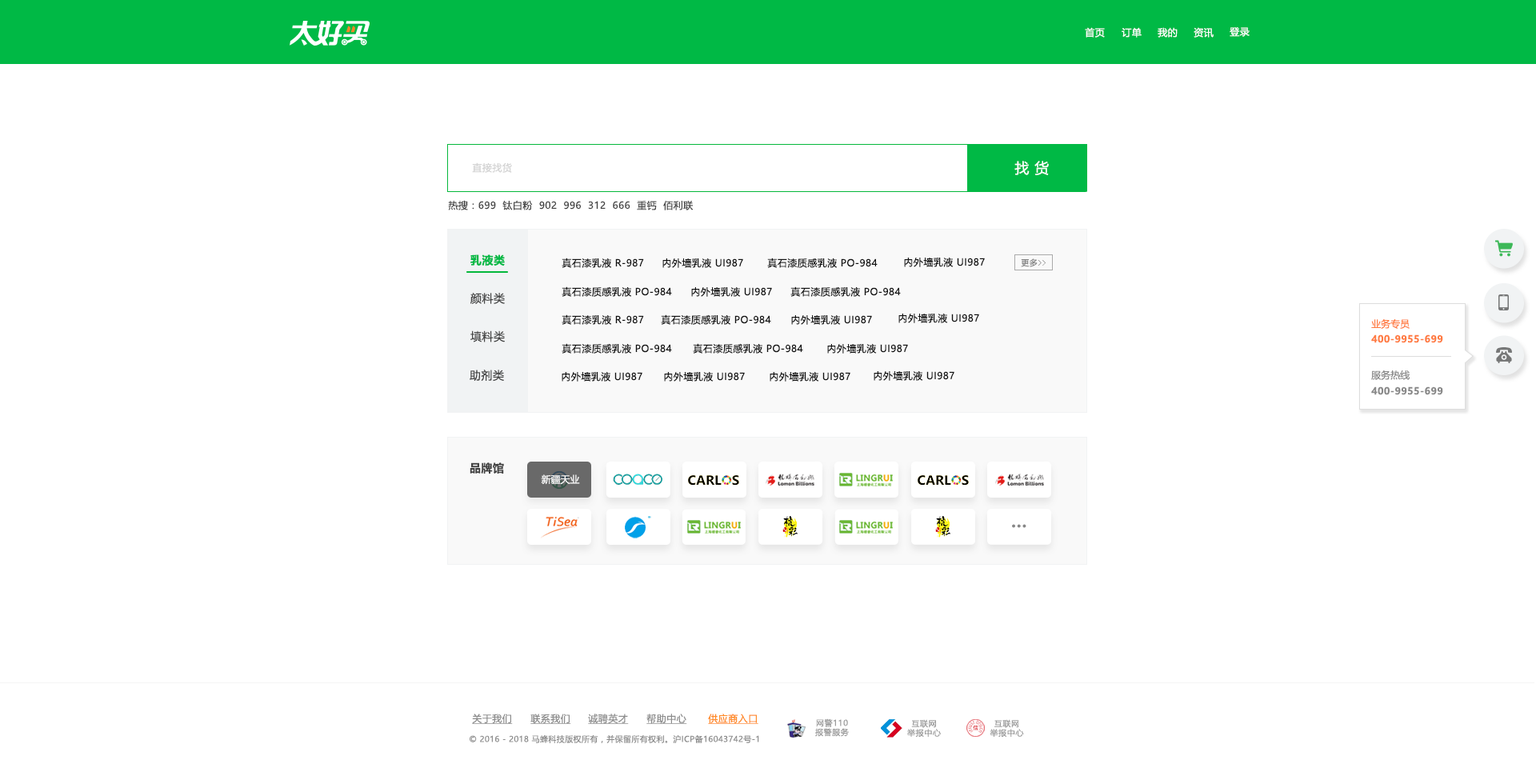
<style>
.page{position:relative;width:1536px;height:776px;background:#ffffff}
.page>*{position:absolute;margin:0}
.t1{font:9.6px "MicrosoftYaHeiUI";letter-spacing:0.04em;color:#ffffff}
.t2{font:14.4px "MicrosoftYaHeiUI";letter-spacing:0.04em;color:#ffffff}
.t3{font:9.6px "MicrosoftYaHeiUI";letter-spacing:0.04em;color:#d2d2d2}
.t4{font:9.6px "MicrosoftYaHeiUI";letter-spacing:0.04em;color:#444444}
.t5{font:11.2px "MicrosoftYaHeiUI-Bold";letter-spacing:0.04em;color:#00b945}
.t6{font:9.6px "MicrosoftYaHeiUI";letter-spacing:0.04em;color:#121212}
.t7{font:8px "MicrosoftYaHeiUI";letter-spacing:0.04em;color:#848484}
.t8{font:8px "FangSong";letter-spacing:0.04em;color:#848484}
.t9{font:11.2px "MicrosoftYaHeiUI";letter-spacing:0.04em;color:#424242}
.t10{font:9.6px "MicrosoftYaHeiUI";color:#ff7b41}
.t11{font:9.6px "MicrosoftYaHeiUI-Bold";letter-spacing:0.04em;color:#ff7b41}
.t12{font:9.6px "MicrosoftYaHeiUI";color:#888888}
.t13{font:9.6px "MicrosoftYaHeiUI-Bold";letter-spacing:0.04em;color:#888888}
.t14{font:11.2px "MicrosoftYaHeiUI-Bold";letter-spacing:0.04em;color:#424242}
.t15{font:9.6px "MicrosoftYaHei";color:#f7f7f7}
.t16{font:11.2px "MicrosoftYaHeiUI-Bold";letter-spacing:0.04em;color:#888888}
.t17{font:9.6px "MicrosoftYaHeiUI";letter-spacing:0.04em;color:#8c8c8c;text-decoration:underline}
.t18{font:9.6px "MicrosoftYaHeiUI";letter-spacing:0.04em;color:#ff8b25;text-decoration:underline}
.t19{font:8px/9.3px "MicrosoftYaHei";letter-spacing:0.06em;color:#999999}
.t20{font:8px "MicrosoftYaHeiUI";letter-spacing:0.04em;color:#8c8c8c}
</style>
<div class="page">
<p class="t1" style="left:1085px;top:27px;width:20px;height:11px">首页</p>
<p class="t1" style="left:1122px;top:27px;width:20px;height:11px">订单</p>
<p class="t1" style="left:1158px;top:27px;width:20px;height:11px">我的</p>
<p class="t1" style="left:1194px;top:27px;width:20px;height:11px">资讯</p>
<p class="t1" style="left:1230px;top:27px;width:20px;height:10px">登录</p>
<p class="t2" style="left:1015px;top:161px;width:34px;height:14px">找 货</p>
<p class="t3" style="left:472px;top:162px;width:40px;height:11px">直接找货</p>
<p class="t4" style="left:448px;top:200px;width:245px;height:10px">热搜：699  钛白粉  902  996  312  666  重钙  佰利联</p>
<p class="t5" style="left:470px;top:254px;width:35px;height:12px">乳液类</p>
<p class="t6" style="left:562px;top:258px;width:82px;height:10px">真石漆乳液 R-987</p>
<p class="t6" style="left:663px;top:258px;width:80px;height:10px">内外墙乳液 UI987</p>
<p class="t6" style="left:767px;top:258px;width:111px;height:10px">真石漆质感乳液 PO-984</p>
<p class="t6" style="left:904px;top:257px;width:81px;height:10px">内外墙乳液 UI987</p>
<p class="t7" style="left:1021px;top:258px;width:25px;height:9px">更多<span class="t8">&gt;&gt;</span></p>
<p class="t9" style="left:470px;top:293px;width:35px;height:11px">颜料类</p>
<p class="t6" style="left:562px;top:286px;width:110px;height:11px">真石漆质感乳液 PO-984</p>
<p class="t6" style="left:691px;top:286px;width:81px;height:11px">内外墙乳液 UI987</p>
<p class="t6" style="left:791px;top:286px;width:110px;height:11px">真石漆质感乳液 PO-984</p>
<p class="t6" style="left:562px;top:314px;width:82px;height:11px">真石漆乳液 R-987</p>
<p class="t6" style="left:661px;top:314px;width:110px;height:11px">真石漆质感乳液 PO-984</p>
<p class="t6" style="left:791px;top:314px;width:81px;height:11px">内外墙乳液 UI987</p>
<p class="t6" style="left:899px;top:313px;width:80px;height:10px">内外墙乳液 UI987</p>
<p class="t10" style="left:1371px;top:318px;width:39px;height:11px">业务专员</p>
<p class="t9" style="left:470px;top:330px;width:35px;height:12px">填料类</p>
<p class="t11" style="left:1371px;top:334px;width:73px;height:9px">400-9955-699</p>
<p class="t6" style="left:562px;top:343px;width:110px;height:11px">真石漆质感乳液 PO-984</p>
<p class="t6" style="left:693px;top:343px;width:110px;height:11px">真石漆质感乳液 PO-984</p>
<p class="t6" style="left:827px;top:343px;width:81px;height:11px">内外墙乳液 UI987</p>
<p class="t9" style="left:470px;top:370px;width:34px;height:12px">助剂类</p>
<p class="t6" style="left:562px;top:371px;width:81px;height:11px">内外墙乳液 UI987</p>
<p class="t6" style="left:664px;top:371px;width:81px;height:11px">内外墙乳液 UI987</p>
<p class="t6" style="left:770px;top:371px;width:81px;height:11px">内外墙乳液 UI987</p>
<p class="t6" style="left:874px;top:370px;width:81px;height:11px">内外墙乳液 UI987</p>
<p class="t12" style="left:1371px;top:370px;width:39px;height:10px">服务热线</p>
<p class="t13" style="left:1371px;top:386px;width:73px;height:9px">400-9955-699</p>
<p class="t14" style="left:470px;top:462px;width:34px;height:12px">品牌馆</p>
<p class="t15" style="left:541px;top:474px;width:39px;height:11px">新疆天业</p>
<p class="t16" style="left:1012px;top:524px;width:15px;height:4px">···</p>
<p class="t17" style="left:472px;top:714px;width:41px;height:10px">关于我们</p>
<p class="t17" style="left:531px;top:714px;width:40px;height:10px">联系我们</p>
<p class="t17" style="left:588px;top:714px;width:41px;height:10px">诚聘英才</p>
<p class="t17" style="left:647px;top:714px;width:40px;height:10px">帮助中心</p>
<p class="t18" style="left:708px;top:714px;width:51px;height:10px">供应商入口</p>
<p class="t19" style="left:815px;top:719px;width:34px;height:18px;text-align:center">网警110<br>报警服务</p>
<p class="t19" style="left:907px;top:719px;width:34px;height:18px;text-align:center">互联网<br>举报中心</p>
<p class="t19" style="left:990px;top:719px;width:34px;height:18px;text-align:center">互联网<br>举报中心</p>
<p class="t20" style="left:470px;top:735px;width:289px;height:8px">© 2016 - 2018 马蜂科技版权所有，并保留所有权利。沪ICP备16043742号-1</p>
</div>
